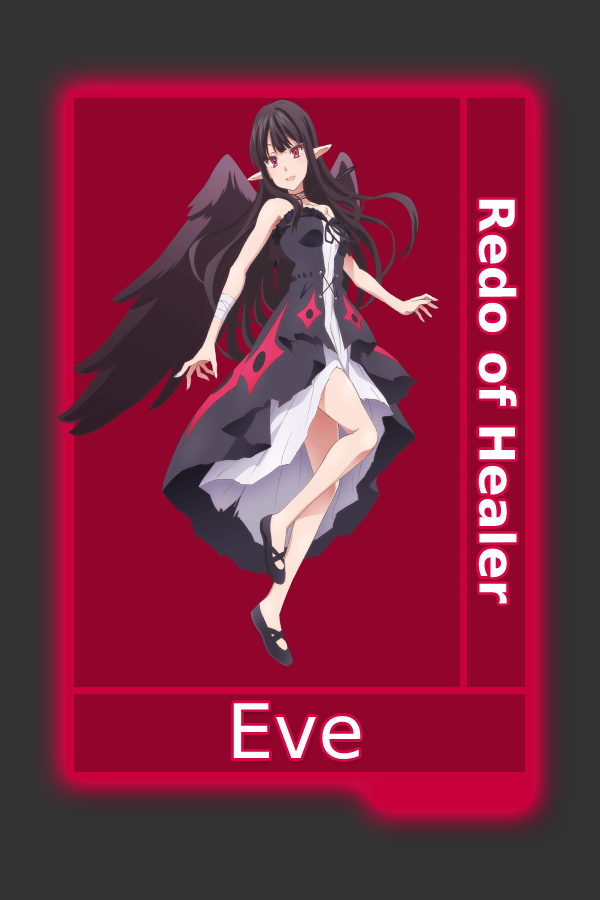
<style>
.page{position:relative;width:600px;height:900px;background:#91042c}
.page>*{position:absolute;margin:0}
.t1{font:48.8px "MADETOMMY-Bold";color:#fefdff}
.t2{font:75px "CoolveticaRg-Regular";color:#fefdff}
</style>
<div class="page">
<p class="t1" style="left:478px;top:199px;width:39px;height:405px;rotate:90deg">Redo of Healer</p>
<p class="t2" style="left:233px;top:703px;width:128px;height:57px">Eve</p>
</div>
